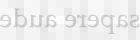
<style>
.page{position:relative;width:140px;height:40px}
.page>*{position:absolute;margin:0}
.t1{font:26px "BookAntiqua";letter-spacing:0.01em;color:#cccccc}
</style>
<div class="page">
<p class="t1" style="left:0px;top:8px;width:140px;height:26px;rotate:180deg">sapere aude</p>
</div>
